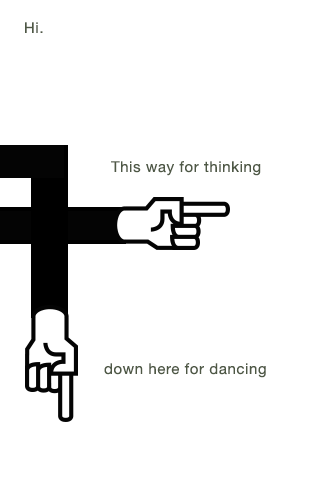
<style>
.page{position:relative;width:320px;height:480px;background:#ffffff}
.page>*{position:absolute;margin:0}
.t1{font:15px "HelveticaNeue";letter-spacing:0.04em;color:#4e5845}
</style>
<div class="page">
<p class="t1" style="left:25px;top:22px;width:18px;height:11px">Hi.</p>
<p class="t1" style="left:111px;top:161px;width:150px;height:15px">This way for thinking</p>
<p class="t1" style="left:104px;top:363px;width:162px;height:15px">down here for dancing</p>
</div>
